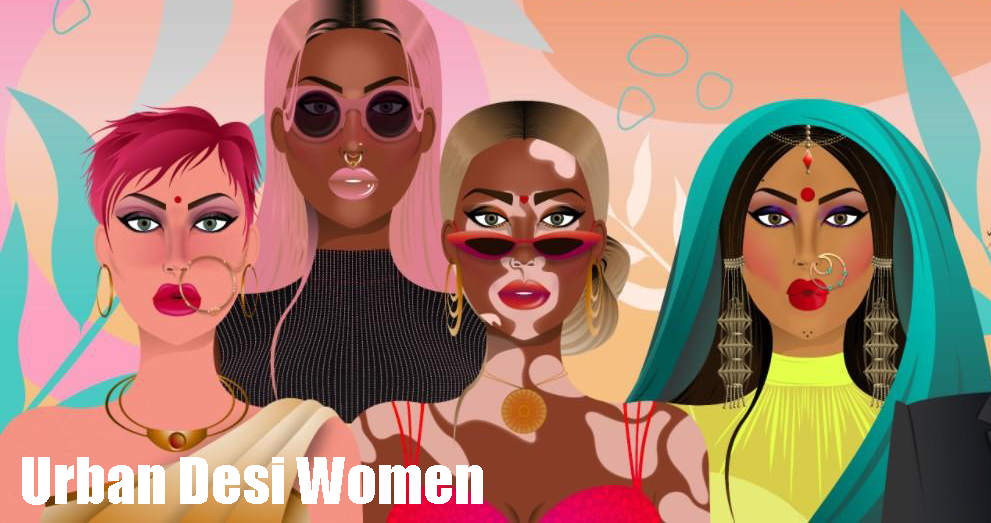
<style>
.page{position:relative;width:991px;height:523px}
.page>*{position:absolute;margin:0}
.t1{font:60px "Impact";color:#ffffff}
</style>
<div class="page">
<p class="t1" style="left:22px;top:457px;width:461px;height:48px">Urban Desi Women</p>
</div>
